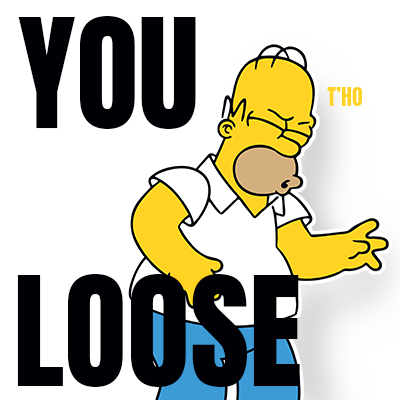
<style>
.page{position:relative;width:400px;height:400px;background:#ffffff}
.page>*{position:absolute;margin:0}
.t1{font:129px "Anton-Regular";color:#000005;text-transform:uppercase}
.t2{font:22px "Anton-Regular";color:#ffd423;text-transform:uppercase}
</style>
<div class="page">
<p class="t1" style="left:18px;top:16px;width:178px;height:113px">YOU</p>
<p class="t2" style="left:327px;top:87px;width:35px;height:19px">t’ho</p>
<p class="t1" style="left:17px;top:274px;width:283px;height:113px">LOOSE</p>
</div>
